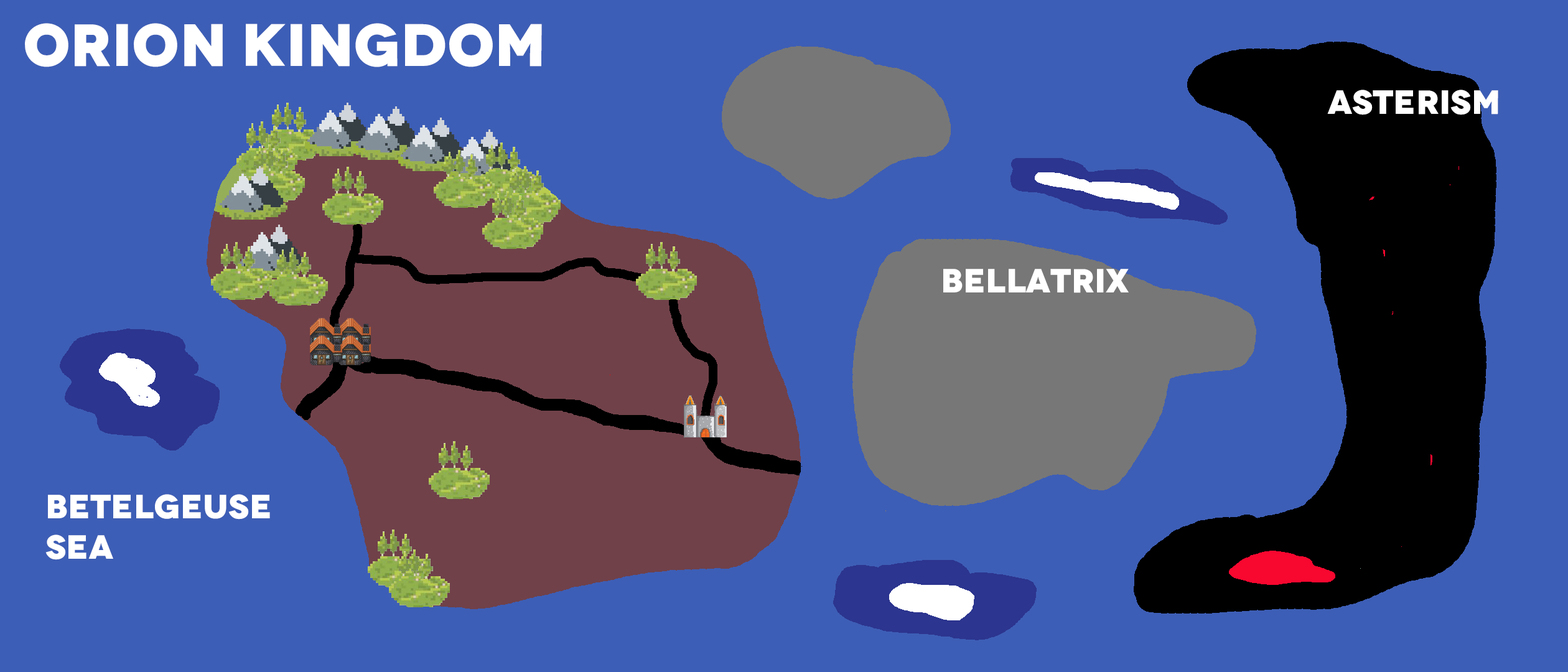
<style>
.page{position:relative;width:1568px;height:672px;background:#3d5eb6}
.page>*{position:absolute;margin:0}
.t1{font:59.7px "Novecento-WideUltraBold";color:#ffffff}
.t2{font:33.6px "Novecento-WideUltraBold";color:#ffffff}
</style>
<div class="page">
<p class="t1" style="left:25px;top:23px;width:517px;height:44px">ORION KINGDOM</p>
<p class="t2" style="left:1327px;top:90px;width:171px;height:25px">asterism</p>
<p class="t2" style="left:943px;top:269px;width:186px;height:24px">Bellatrix</p>
<p class="t2" style="left:45px;top:494px;width:225px;height:66px">Betelgeuse<br>SEA</p>
</div>
